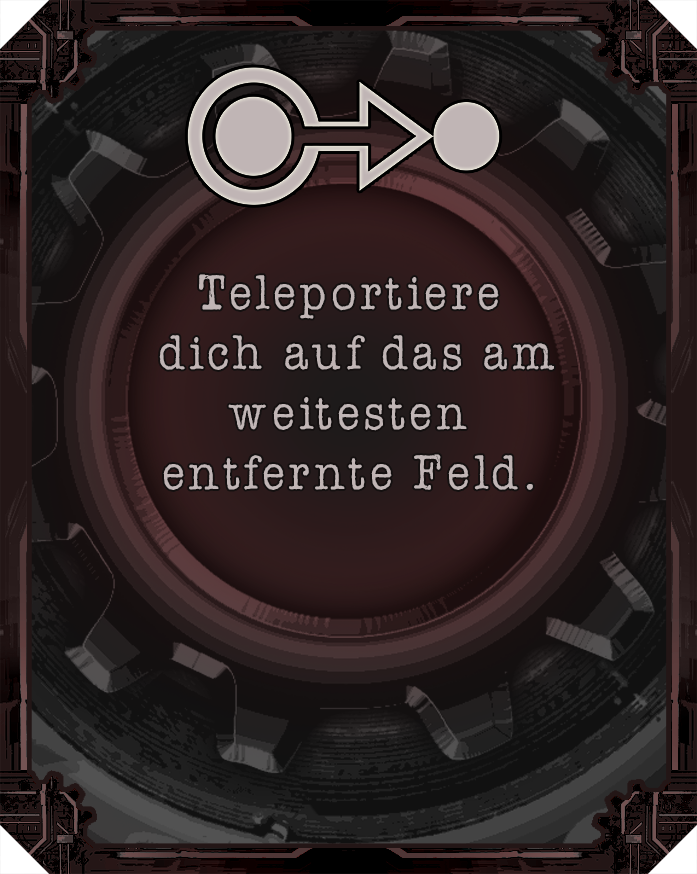
<style>
.page{position:relative;width:697px;height:874px}
.page>*{position:absolute;margin:0}
.t1{font:50px "AmerTypewriterITCbyBT-Medium";letter-spacing:0.02em;color:#c0b5b5}
</style>
<div class="page">
<p class="t1" style="left:159px;top:274px;width:395px;height:216px;text-align:center">Teleportiere<br> dich auf das am weitesten entfernte Feld.</p>
</div>
